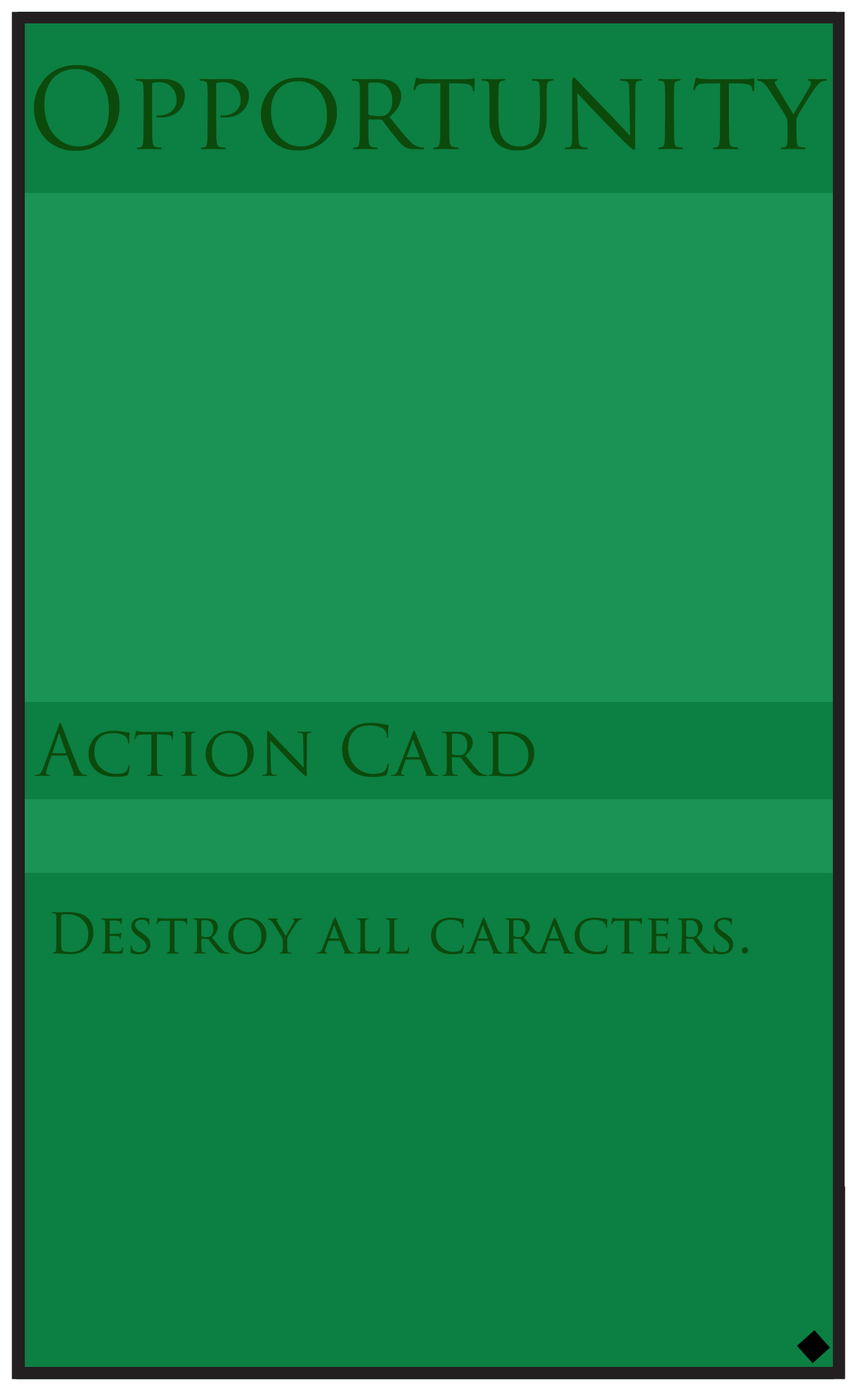
<style>
.page{position:relative;width:857px;height:1391px;background:#0c7f42}
.page>*{position:absolute;margin:0}
.t1{font:109.1px "TrajanPro-Regular";color:#0c4a0c}
.t2{font:68.9px "TrajanPro-Regular";color:#0c4a0c}
.t3{font:54.5px "TrajanPro-Regular";color:#0c4a0c}
</style>
<div class="page">
<p class="t1" style="left:34px;top:65px;width:793px;height:86px">Opportunity</p>
<p class="t2" style="left:34px;top:723px;width:501px;height:54px">Action Card</p>
<p class="t3" style="left:52px;top:912px;width:696px;height:42px">Destroy all caracters.</p>
</div>
